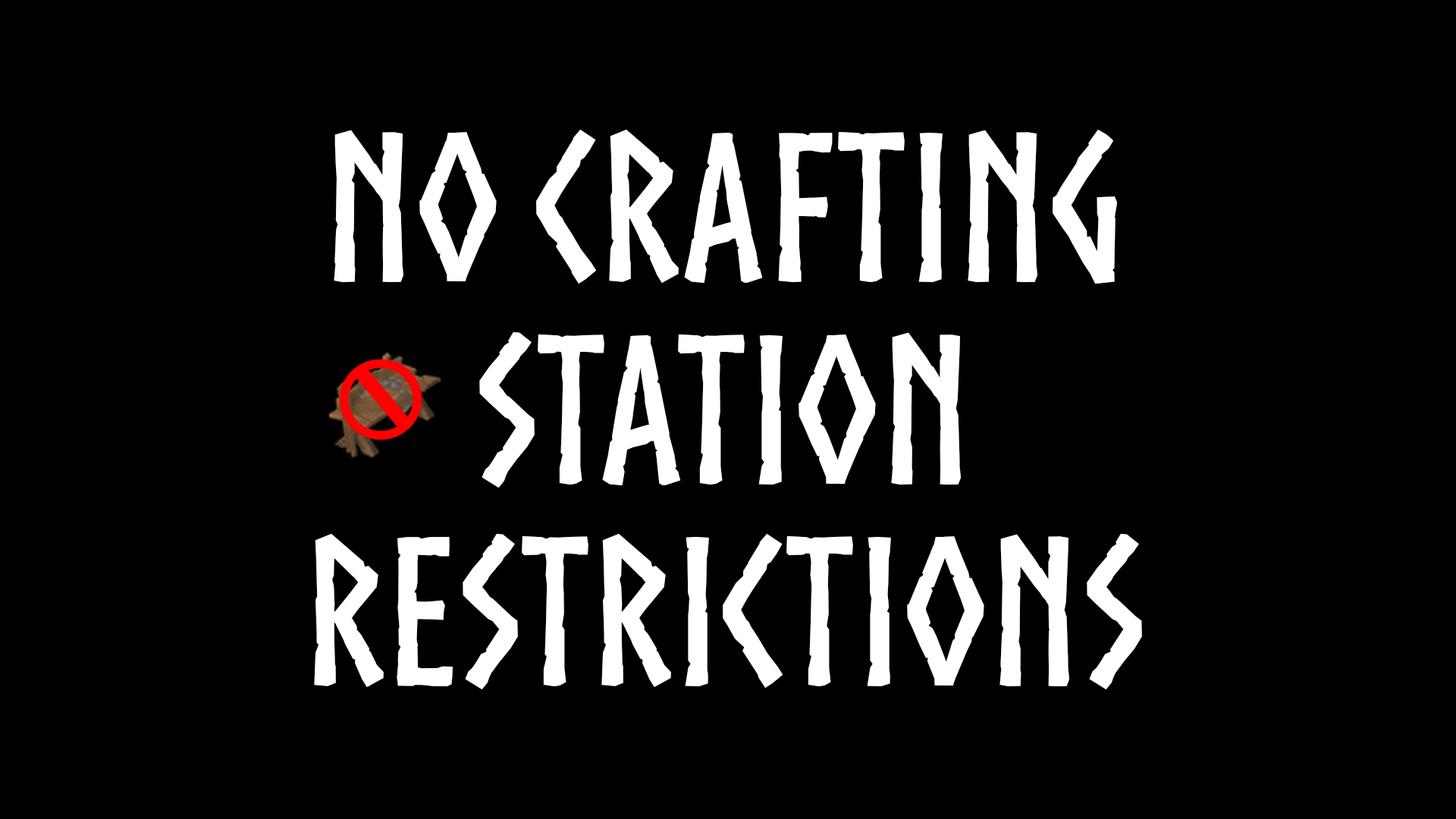
<style>
.page{position:relative;width:1456px;height:819px;background:#000000}
.page>*{position:absolute;margin:0}
.t1{font:202.2px/202.2px "Norse-Bold";color:#ffffff}
</style>
<div class="page">
<p class="t1" style="left:314px;top:130px;width:828px;height:559px;text-align:center">No Crafting<br>Station<br>Restrictions</p>
</div>
